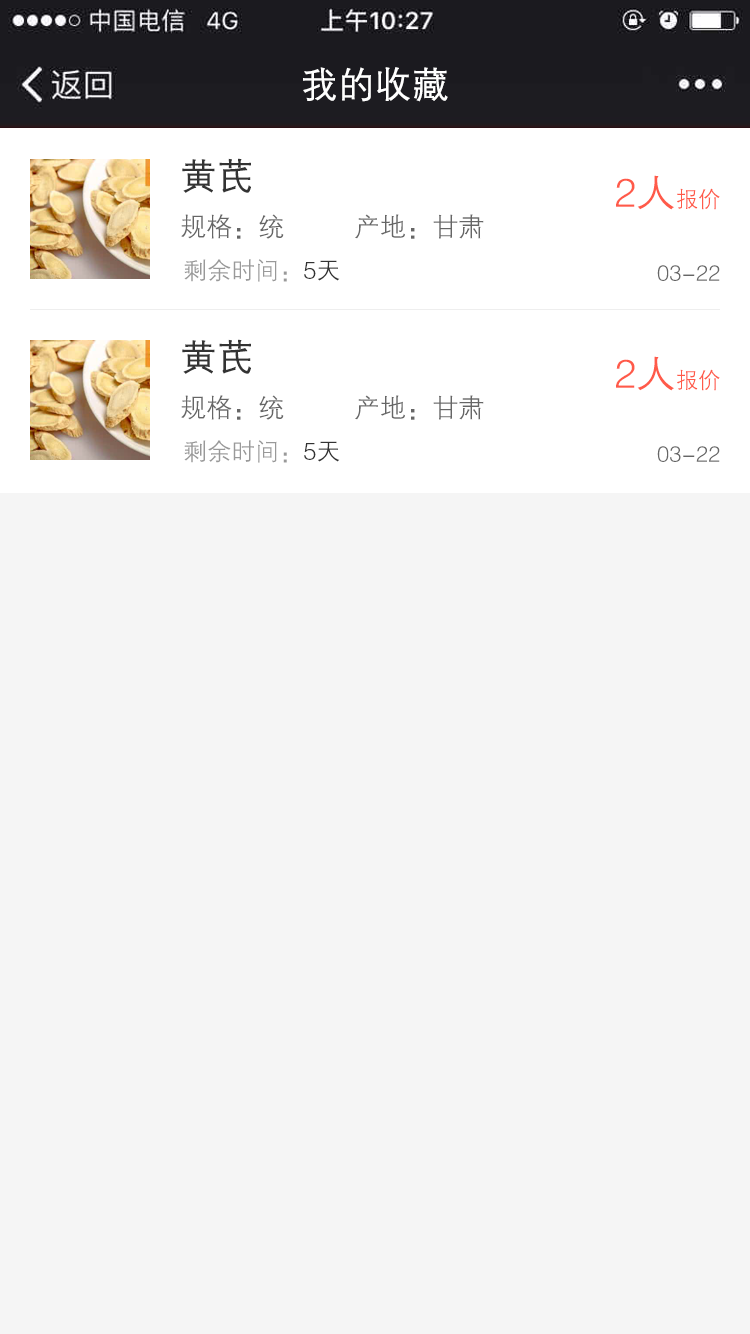
<style>
.page{position:relative;width:750px;height:1334px;background:#f5f5f5}
.page>*{position:absolute;margin:0}
.t1{font:36px "FZZDXJW--GB1-0";color:#ffffff;font-weight:bold}
.t2{font:36px "FZZDXJW--GB1-0";color:#333333;font-weight:bold}
.t3{font:40px "FZZDXJW--GB1-0";color:#ff5a49}
.t4{font:22px "FZZDXJW--GB1-0";color:#ff5a49}
.t5{font:26px "FZZDXJW--GB1-0";color:#666666}
.t6{font:24px "FZZDXJW--GB1-0";color:#999999}
.t7{font:24px "FZZDXJW--GB1-0";color:#333333}
.t8{font:22px "FZZDXJW--GB1-0";color:#666666}
</style>
<div class="page">
<p class="t1" style="left:303px;top:67px;width:145px;height:35px">我的收藏</p>
<p class="t2" style="left:182px;top:158px;width:69px;height:35px">黄芪</p>
<p class="t3" style="left:616px;top:175px;width:104px;height:35px">2人<span class="t4">报价</span></p>
<p class="t5" style="left:181px;top:214px;width:103px;height:25px">规格：统</p>
<p class="t5" style="left:355px;top:214px;width:129px;height:25px">产地：甘肃</p>
<p class="t6" style="left:184px;top:259px;width:156px;height:23px">剩余时间：<span class="t7">5天</span></p>
<p class="t8" style="left:657px;top:265px;width:63px;height:16px">03-22</p>
<p class="t2" style="left:182px;top:339px;width:69px;height:35px">黄芪</p>
<p class="t3" style="left:616px;top:356px;width:104px;height:35px">2人<span class="t4">报价</span></p>
<p class="t5" style="left:181px;top:395px;width:103px;height:25px">规格：统</p>
<p class="t5" style="left:355px;top:395px;width:129px;height:25px">产地：甘肃</p>
<p class="t6" style="left:184px;top:440px;width:156px;height:23px">剩余时间：<span class="t7">5天</span></p>
<p class="t8" style="left:657px;top:446px;width:63px;height:16px">03-22</p>
</div>
